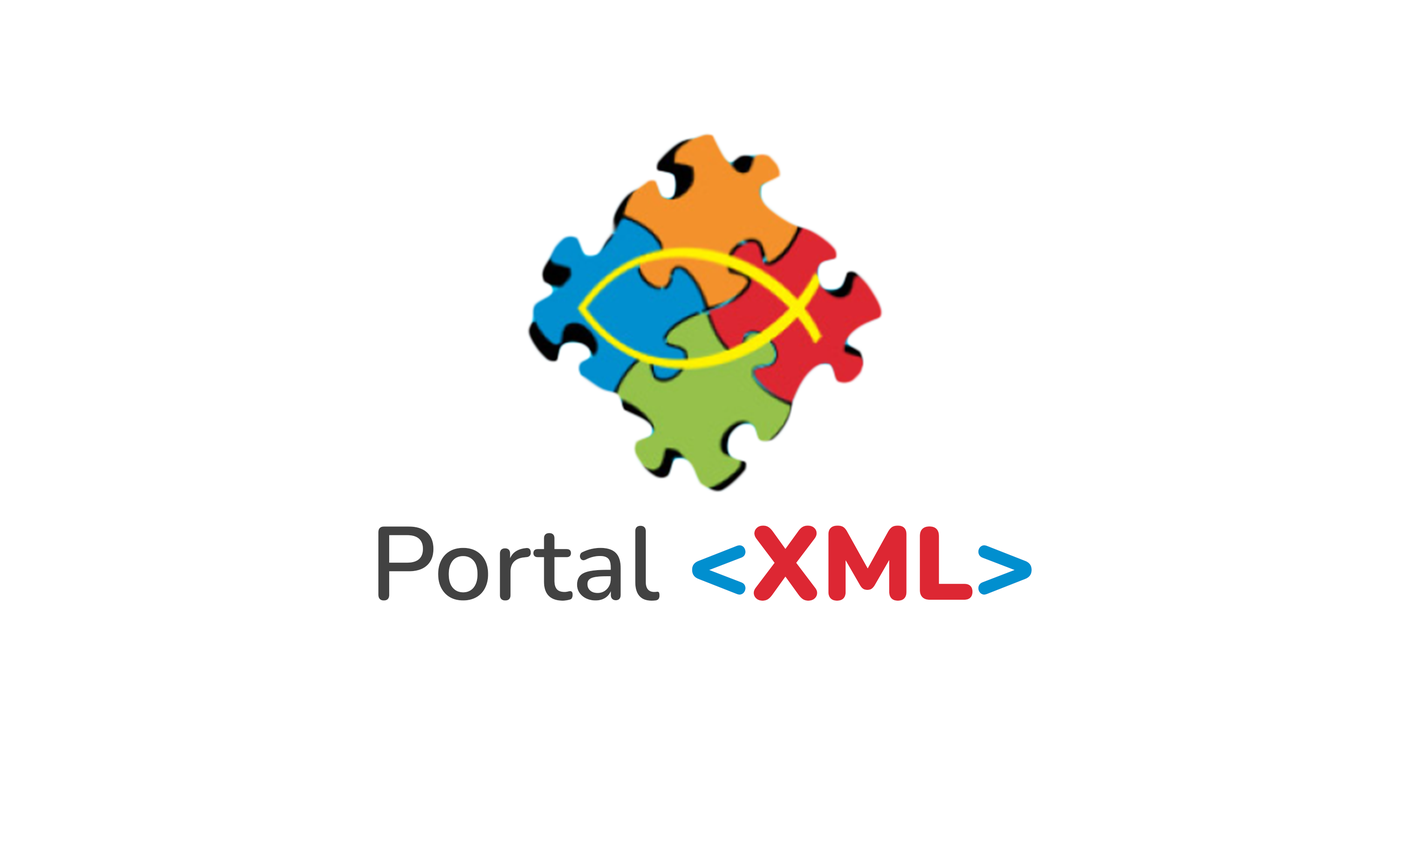
<style>
.page{position:relative;width:1410px;height:846px;background:#ffffff}
.page>*{position:absolute;margin:0}
.t1{font:103.8px "Nunito-SemiBold";color:#424242}
.t2{font:103.8px "Nunito-Black";color:#018fcf}
.t3{font:103.8px "Nunito-Black";color:#dd2733}
</style>
<div class="page">
<p class="t1" style="left:378px;top:525px;width:653px;height:76px">Portal <span class="t2">&lt;</span><span class="t3">XML</span><span class="t2">&gt;</span></p>
</div>
